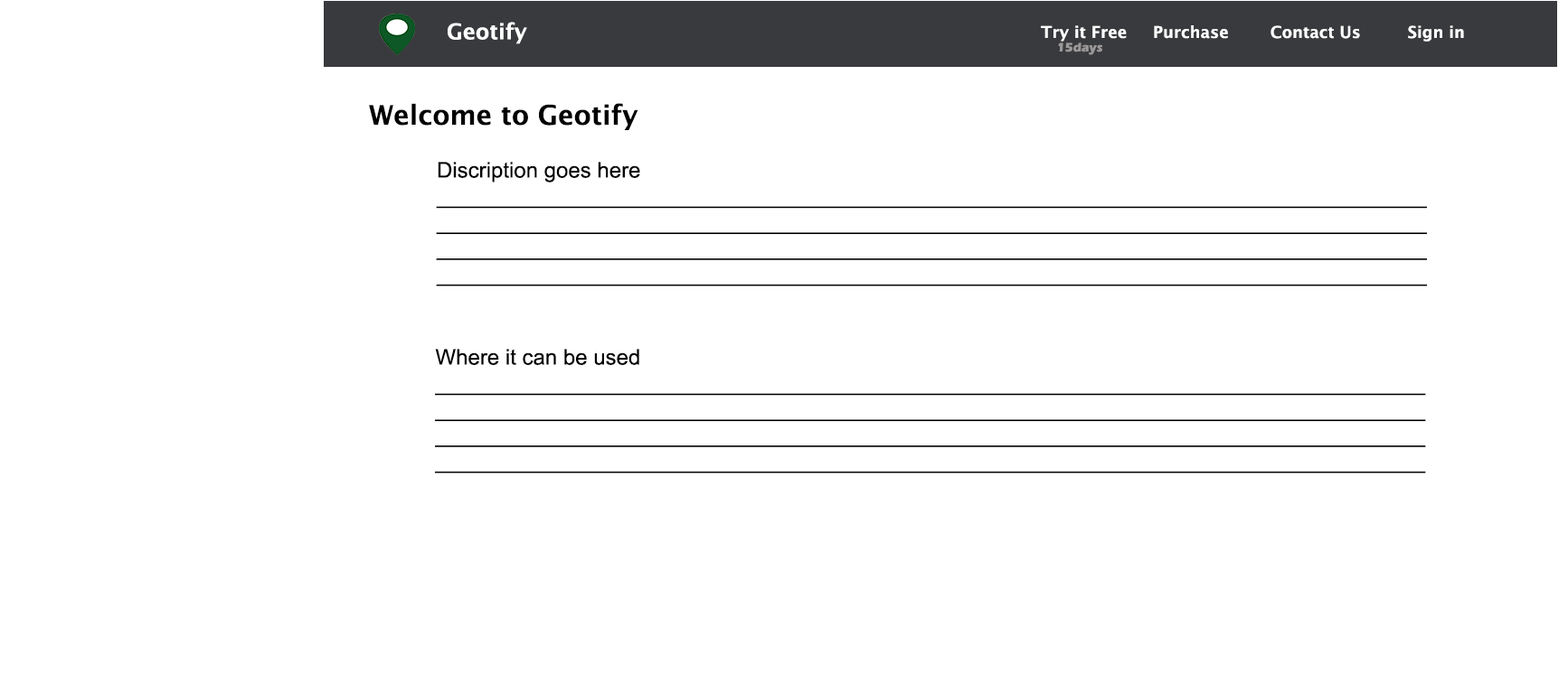
<style>
.page{position:relative;width:1568px;height:694px;background:#ffffff}
.page>*{position:absolute;margin:0}
.t1{font:21.7px "LucidaSans-Demi";color:#ffffff}
.t2{font:16.3px "LucidaSans-Demi";color:#ffffff}
.t3{font:12.7px "ErasITC-Bold";color:#9b9898}
.t4{font:27.1px "LucidaSans-Demi";color:#000000}
.t5{font:21.7px "ArialMT";color:#000000}
</style>
<div class="page">
<p class="t1" style="left:448px;top:22px;width:79px;height:22px">Geotify</p>
<p class="t2" style="left:1041px;top:25px;width:423px;height:17px">Try it Free     Purchase        Contact Us         Sign in</p>
<p class="t3" style="left:1058px;top:43px;width:44px;height:12px">15days</p>
<p class="t4" style="left:369px;top:103px;width:269px;height:27px">Welcome to Geotify</p>
<p class="t5" style="left:436px;top:162px;width:991px;height:125px">Discription goes here<br>__________________________________________________________________________________<br>__________________________________________________________________________________<br>__________________________________________________________________________________<br>__________________________________________________________________________________</p>
<p class="t5" style="left:435px;top:349px;width:991px;height:125px">Where it can be used<br>__________________________________________________________________________________<br>__________________________________________________________________________________<br>__________________________________________________________________________________<br>__________________________________________________________________________________</p>
</div>
